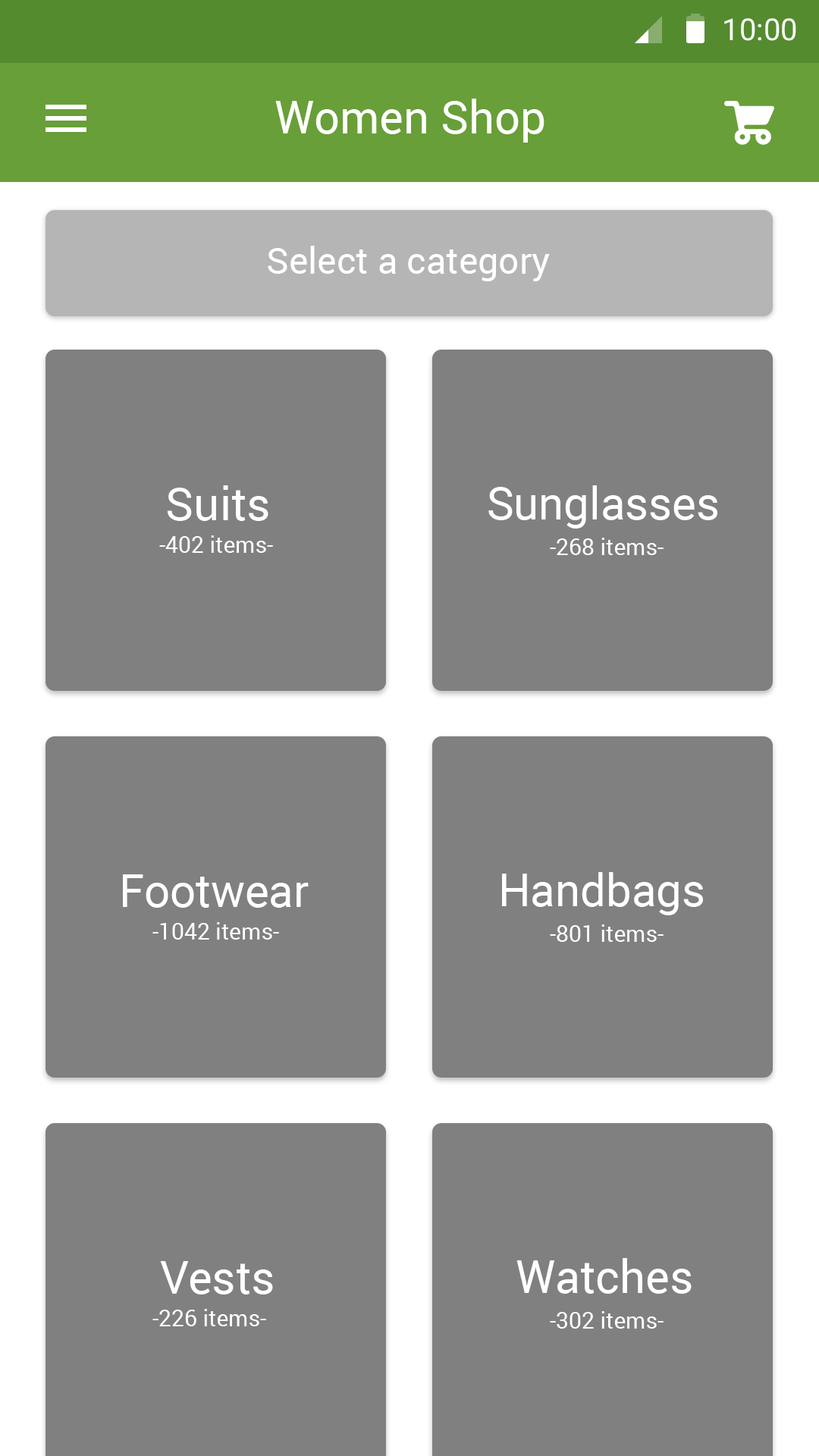
<style>
.page{position:relative;width:819px;height:1456px;background:#808080}
.page>*{position:absolute;margin:0}
.t1{font:30.3px "Roboto-Regular";color:#ffffff}
.t2{font:45.5px "Roboto-Regular";color:#ffffff}
.t3{font:36.4px "Roboto-Regular";color:#ffffff}
.t4{font:22.7px "Roboto-Regular";color:#ffffff}
</style>
<div class="page">
<p class="t1" style="left:724px;top:18px;width:72px;height:23px">10:00</p>
<p class="t2" style="left:275px;top:99px;width:269px;height:44px">Women Shop</p>
<p class="t3" style="left:268px;top:246px;width:282px;height:35px">Select a category</p>
<p class="t2" style="left:168px;top:485px;width:100px;height:36px">Suits</p>
<p class="t2" style="left:488px;top:485px;width:229px;height:44px">Sunglasses</p>
<p class="t4" style="left:159px;top:535px;width:114px;height:18px">-402 items-</p>
<p class="t4" style="left:550px;top:538px;width:114px;height:17px">-268 items-</p>
<p class="t2" style="left:123px;top:874px;width:186px;height:34px">Footwear</p>
<p class="t2" style="left:502px;top:872px;width:201px;height:43px">Handbags</p>
<p class="t4" style="left:152px;top:922px;width:127px;height:18px">-1042 items-</p>
<p class="t4" style="left:550px;top:924px;width:114px;height:18px">-801 items-</p>
<p class="t2" style="left:160px;top:1261px;width:113px;height:33px">Vests</p>
<p class="t2" style="left:516px;top:1258px;width:176px;height:36px">Watches</p>
<p class="t4" style="left:152px;top:1309px;width:114px;height:17px">-226 items-</p>
<p class="t4" style="left:550px;top:1311px;width:114px;height:18px">-302 items-</p>
</div>
